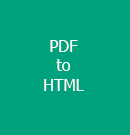
<style>
.page{position:relative;width:130px;height:135px;background:#00a27d}
.page>*{position:absolute;margin:0}
.t1{font:12px "Tahoma";color:#fcfcfa}
</style>
<div class="page">
<p class="t1" style="left:44px;top:40px;width:40px;height:51px;text-align:center">PDF<br>to<br>HTML</p>
</div>
